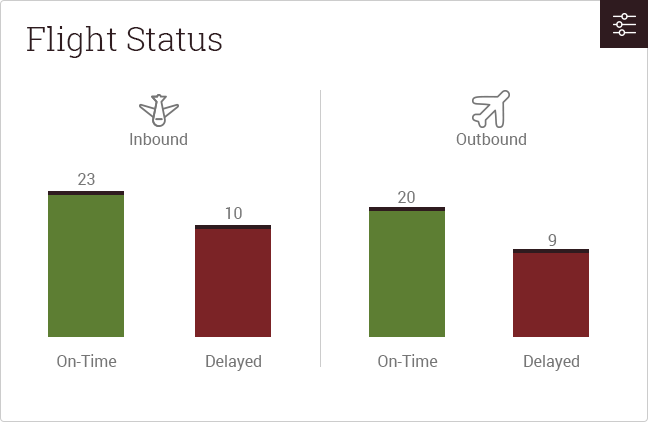
<style>
.page{position:relative;width:648px;height:422px;background:#ffffff}
.page>*{position:absolute;margin:0}
.t1{font:33px "RobotoSlab-Light";color:#2f1b1f}
.t2{font:16px "Roboto-Regular";color:#767676}
</style>
<div class="page">
<p class="t1" style="left:27px;top:26px;width:195px;height:32px">Flight Status</p>
<p class="t2" style="left:130px;top:133px;width:57px;height:12px">Inbound</p>
<p class="t2" style="left:456px;top:133px;width:70px;height:12px">Outbound</p>
<p class="t2" style="left:78px;top:173px;width:17px;height:12px">23</p>
<p class="t2" style="left:398px;top:191px;width:17px;height:12px">20</p>
<p class="t2" style="left:225px;top:207px;width:17px;height:12px">10</p>
<p class="t2" style="left:548px;top:234px;width:9px;height:12px">9</p>
<p class="t2" style="left:57px;top:354px;width:60px;height:13px">On-Time</p>
<p class="t2" style="left:206px;top:355px;width:55px;height:16px">Delayed</p>
<p class="t2" style="left:378px;top:354px;width:60px;height:13px">On-Time</p>
<p class="t2" style="left:524px;top:355px;width:55px;height:16px">Delayed</p>
</div>
